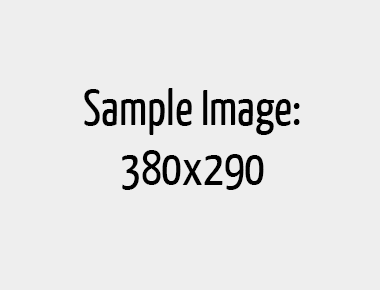
<style>
.page{position:relative;width:380px;height:290px;background:#eeeeee}
.page>*{position:absolute;margin:0}
.t1{font:50px "YanoneKaffeesatz-Regular";color:#000000}
</style>
<div class="page">
<p class="t1" style="left:84px;top:88px;width:216px;height:102px;text-align:center">Sample Image:<br>380x290</p>
</div>
